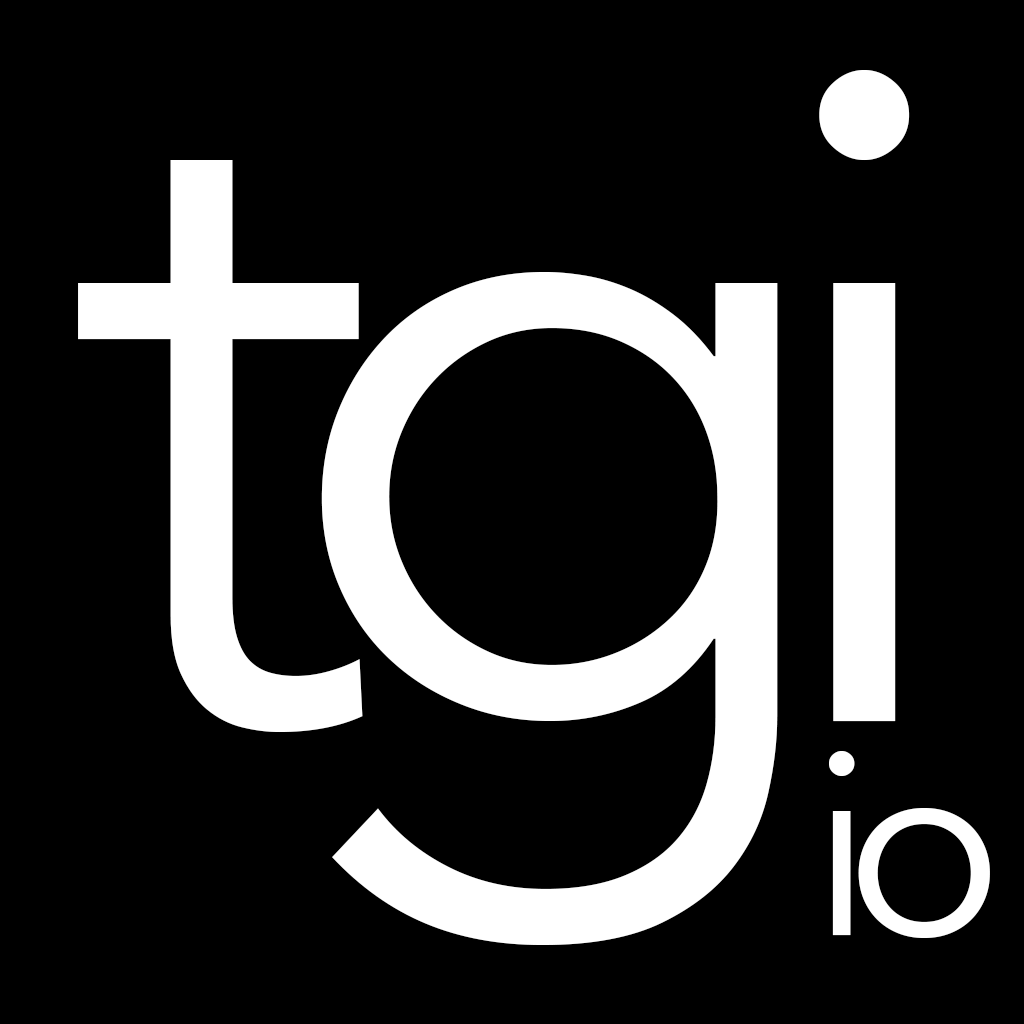
<style>
.page{position:relative;width:1024px;height:1024px;background:#000000}
.page>*{position:absolute;margin:0}
.t1{font:935px "Avenir-Book";letter-spacing:-0.075em;color:#ffffff}
.t2{font:264px "Avenir-Book";letter-spacing:-0.075em;color:#ffffff}
</style>
<div class="page">
<p class="t1" style="left:78px;top:70px;width:832px;height:875px">tgi</p>
<p class="t2" style="left:829px;top:751px;width:161px;height:187px">io</p>
</div>
